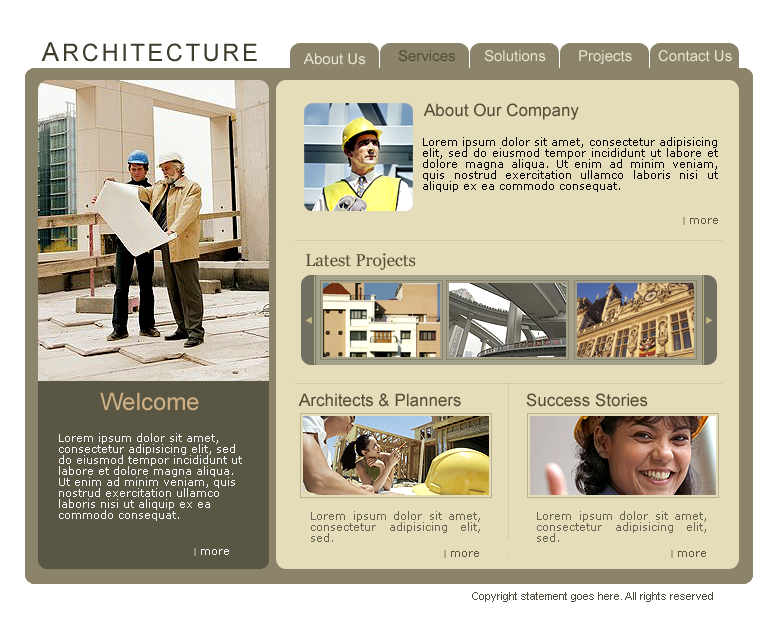
<style>
.page{position:relative;width:778px;height:625px;background:#e5dcb9}
.page>*{position:absolute;margin:0}
.t1{font:24px "ArialMT";letter-spacing:0.1em;color:#3f3c2d;text-transform:uppercase}
.t2{font:26px "ArialMT";letter-spacing:0.1em;color:#3f3c2d;text-transform:uppercase}
.t3{font:15px "ArialMT";color:#e9e4d0}
.t4{font:15px "ArialMT";color:#544e38}
.t5{font:17px "ArialMT";color:#544e38}
.t6{font:11px/11px "Verdana";color:#000000}
.t7{font:11px "Verdana";color:#5a5644}
.t8{font:17px "Georgia";color:#544e38}
.t9{font:24px "ArialMT";color:#ceb085}
.t10{font:11px/11px "Verdana";color:#f2f7f8}
.t11{font:11px/11px "Verdana";color:#686454}
.t12{font:11px "Verdana";color:#f2f7f8}
.t13{font:11px "ArialMT";color:#4e4a3a}
</style>
<div class="page">
<p class="t1" style="left:41px;top:42px;width:216px;height:20px"><span class="t2">A</span>rchitecture</p>
<p class="t3" style="left:303px;top:53px;width:63px;height:12px">About Us</p>
<p class="t4" style="left:398px;top:50px;width:57px;height:12px">Services</p>
<p class="t3" style="left:484px;top:50px;width:62px;height:12px">Solutions</p>
<p class="t3" style="left:579px;top:50px;width:53px;height:14px">Projects</p>
<p class="t3" style="left:658px;top:50px;width:74px;height:12px">Contact Us</p>
<p class="t5" style="left:423px;top:103px;width:156px;height:17px">About Our Company</p>
<p class="t6" style="left:423px;top:137px;width:295px;height:55px;text-align:justify">Lorem ipsum dolor sit amet, consectetur adipisicing elit, sed do eiusmod tempor incididunt ut labore et dolore magna aliqua. Ut enim ad minim veniam, quis nostrud exercitation ullamco laboris nisi ut aliquip ex ea commodo consequat.</p>
<p class="t7" style="left:690px;top:218px;width:28px;height:6px">more</p>
<p class="t8" style="left:306px;top:253px;width:110px;height:17px">Latest Projects</p>
<p class="t9" style="left:100px;top:392px;width:99px;height:19px">Welcome</p>
<p class="t5" style="left:298px;top:393px;width:163px;height:14px">Architects &amp; Planners</p>
<p class="t5" style="left:526px;top:393px;width:122px;height:14px">Success Stories</p>
<p class="t10" style="left:59px;top:433px;width:183px;height:88px">Lorem ipsum dolor sit amet, consectetur adipisicing elit, sed do eiusmod tempor incididunt ut labore et dolore magna aliqua. Ut enim ad minim veniam, quis nostrud exercitation ullamco laboris nisi ut aliquip ex ea commodo consequat.</p>
<p class="t11" style="left:311px;top:511px;width:169px;height:31px;text-align:justify">Lorem ipsum dolor sit amet, consectetur adipisicing elit, sed.</p>
<p class="t11" style="left:537px;top:511px;width:169px;height:31px;text-align:justify">Lorem ipsum dolor sit amet, consectetur adipisicing elit, sed.</p>
<p class="t12" style="left:201px;top:549px;width:28px;height:6px">more</p>
<p class="t7" style="left:451px;top:551px;width:28px;height:6px">more</p>
<p class="t7" style="left:678px;top:551px;width:28px;height:6px">more</p>
<p class="t13" style="left:472px;top:592px;width:241px;height:10px">Copyright statement goes here. All rights reserved</p>
</div>
